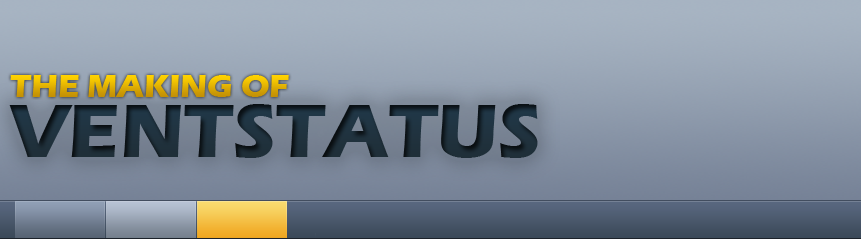
<style>
.page{position:relative;width:861px;height:239px}
.page>*{position:absolute;margin:0}
.t1{font:32.7px "ErasITC-Bold"}
.t2{font:77.6px "ErasITC-Bold";color:#1e2f3a}
</style>
<div class="page">
<p class="t1" style="left:10px;top:75px;width:279px;height:22px">THE MAKING OF</p>
<p class="t2" style="left:9px;top:104px;width:529px;height:54px">VENTSTATUS</p>
</div>
